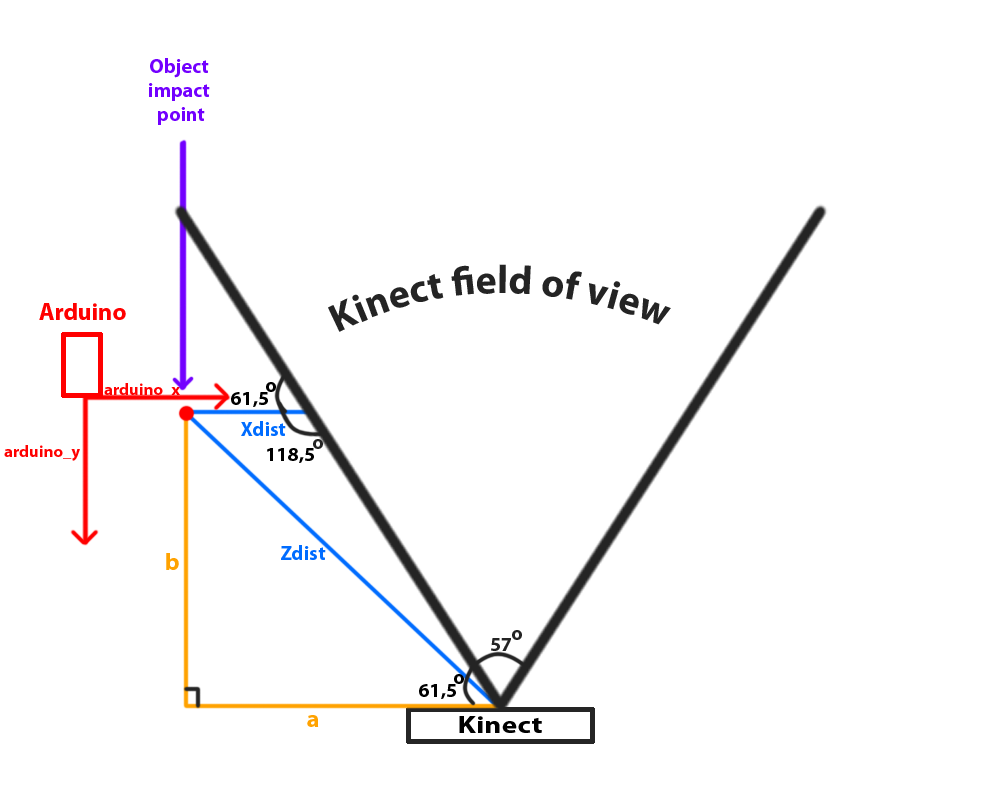
<style>
.page{position:relative;width:1000px;height:800px;background:#ffffff}
.page>*{position:absolute;margin:0}
.t1{font:20px "MyriadPro-Bold";color:#7200ff}
.t2{font:40px "MyriadPro-Bold";color:#242424}
.t3{font:24px "MyriadPro-Bold";color:#ff0000}
.t4{font:16.6px "MyriadPro-Bold";color:#ff0000}
.t5{font:20px "MyriadPro-Bold";color:#000000}
.t6{font:20px "MyriadPro-Bold";color:#006cff}
.t7{font:20px "MyriadPro-Bold";color:#242424}
.t8{font:24px "MyriadPro-Bold";color:#ffa200}
.t9{font:24px "MyriadPro-Bold";color:#000000;scale:1.25 1}
</style>
<div class="page">
<p class="t1" style="left:149px;top:58px;width:61px;height:67px;text-align:center">Object <br>impact <br>point</p>
<p class="t2" style="left:328px;top:264px;width:343px;height:68px;text-align:center">Kinect field of view</p>
<p class="t3" style="left:39px;top:303px;width:87px;height:17px">Arduino</p>
<p class="t4" style="left:104px;top:383px;width:76px;height:14px">arduino_x</p>
<p class="t5" style="left:266px;top:382px;width:10px;height:10px">o</p>
<p class="t5" style="left:231px;top:392px;width:37px;height:15px">61,5</p>
<p class="t6" style="left:241px;top:421px;width:45px;height:15px">Xdist</p>
<p class="t4" style="left:4px;top:445px;width:76px;height:16px">arduino_y</p>
<p class="t5" style="left:267px;top:448px;width:47px;height:15px">118,5</p>
<p class="t7" style="left:313px;top:439px;width:10px;height:10px">o</p>
<p class="t6" style="left:281px;top:545px;width:45px;height:15px">Zdist</p>
<p class="t8" style="left:166px;top:553px;width:13px;height:17px">b</p>
<p class="t7" style="left:512px;top:630px;width:10px;height:10px">o</p>
<p class="t7" style="left:491px;top:638px;width:20px;height:13px">57</p>
<p class="t5" style="left:454px;top:674px;width:10px;height:10px">o</p>
<p class="t5" style="left:419px;top:684px;width:37px;height:15px">61,5</p>
<p class="t8" style="left:307px;top:715px;width:12px;height:12px">a</p>
<p class="t9" style="left:459px;top:716px;width:83px;height:17px">Kinect</p>
</div>
